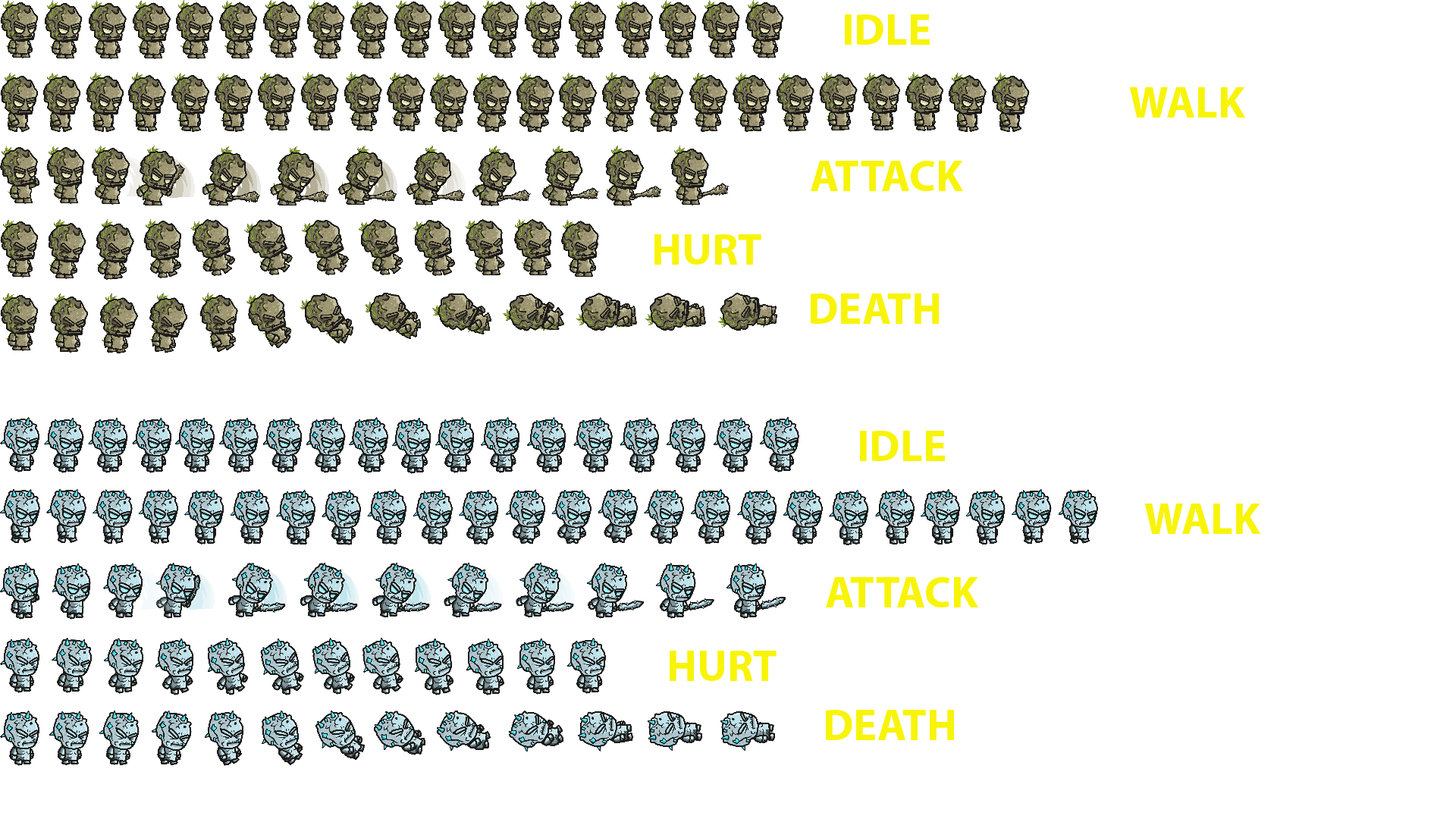
<style>
.page{position:relative;width:1456px;height:819px;background:#ffffff}
.page>*{position:absolute;margin:0}
.t1{font:44.2px "MyriadPro-Bold";color:#f8f408}
</style>
<div class="page">
<p class="t1" style="left:845px;top:14px;width:85px;height:31px">IDLE</p>
<p class="t1" style="left:1129px;top:87px;width:116px;height:31px">WALK</p>
<p class="t1" style="left:811px;top:161px;width:153px;height:30px">ATTACK</p>
<p class="t1" style="left:654px;top:234px;width:107px;height:31px">HURT</p>
<p class="t1" style="left:811px;top:293px;width:128px;height:31px">DEATH</p>
<p class="t1" style="left:860px;top:431px;width:85px;height:30px">IDLE</p>
<p class="t1" style="left:1144px;top:504px;width:117px;height:30px">WALK</p>
<p class="t1" style="left:826px;top:577px;width:153px;height:30px">ATTACK</p>
<p class="t1" style="left:670px;top:651px;width:107px;height:30px">HURT</p>
<p class="t1" style="left:826px;top:710px;width:128px;height:30px">DEATH</p>
</div>
